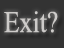
<style>
.page{position:relative;width:64px;height:48px;background:#333333}
.page>*{position:absolute;margin:0}
.t1{font:30px "TimesNewRomanPSMT";color:#cdcbc9;scale:0.86 1}
</style>
<div class="page">
<p class="t1" style="left:4px;top:11px;width:54px;height:22px">Exit?</p>
</div>
